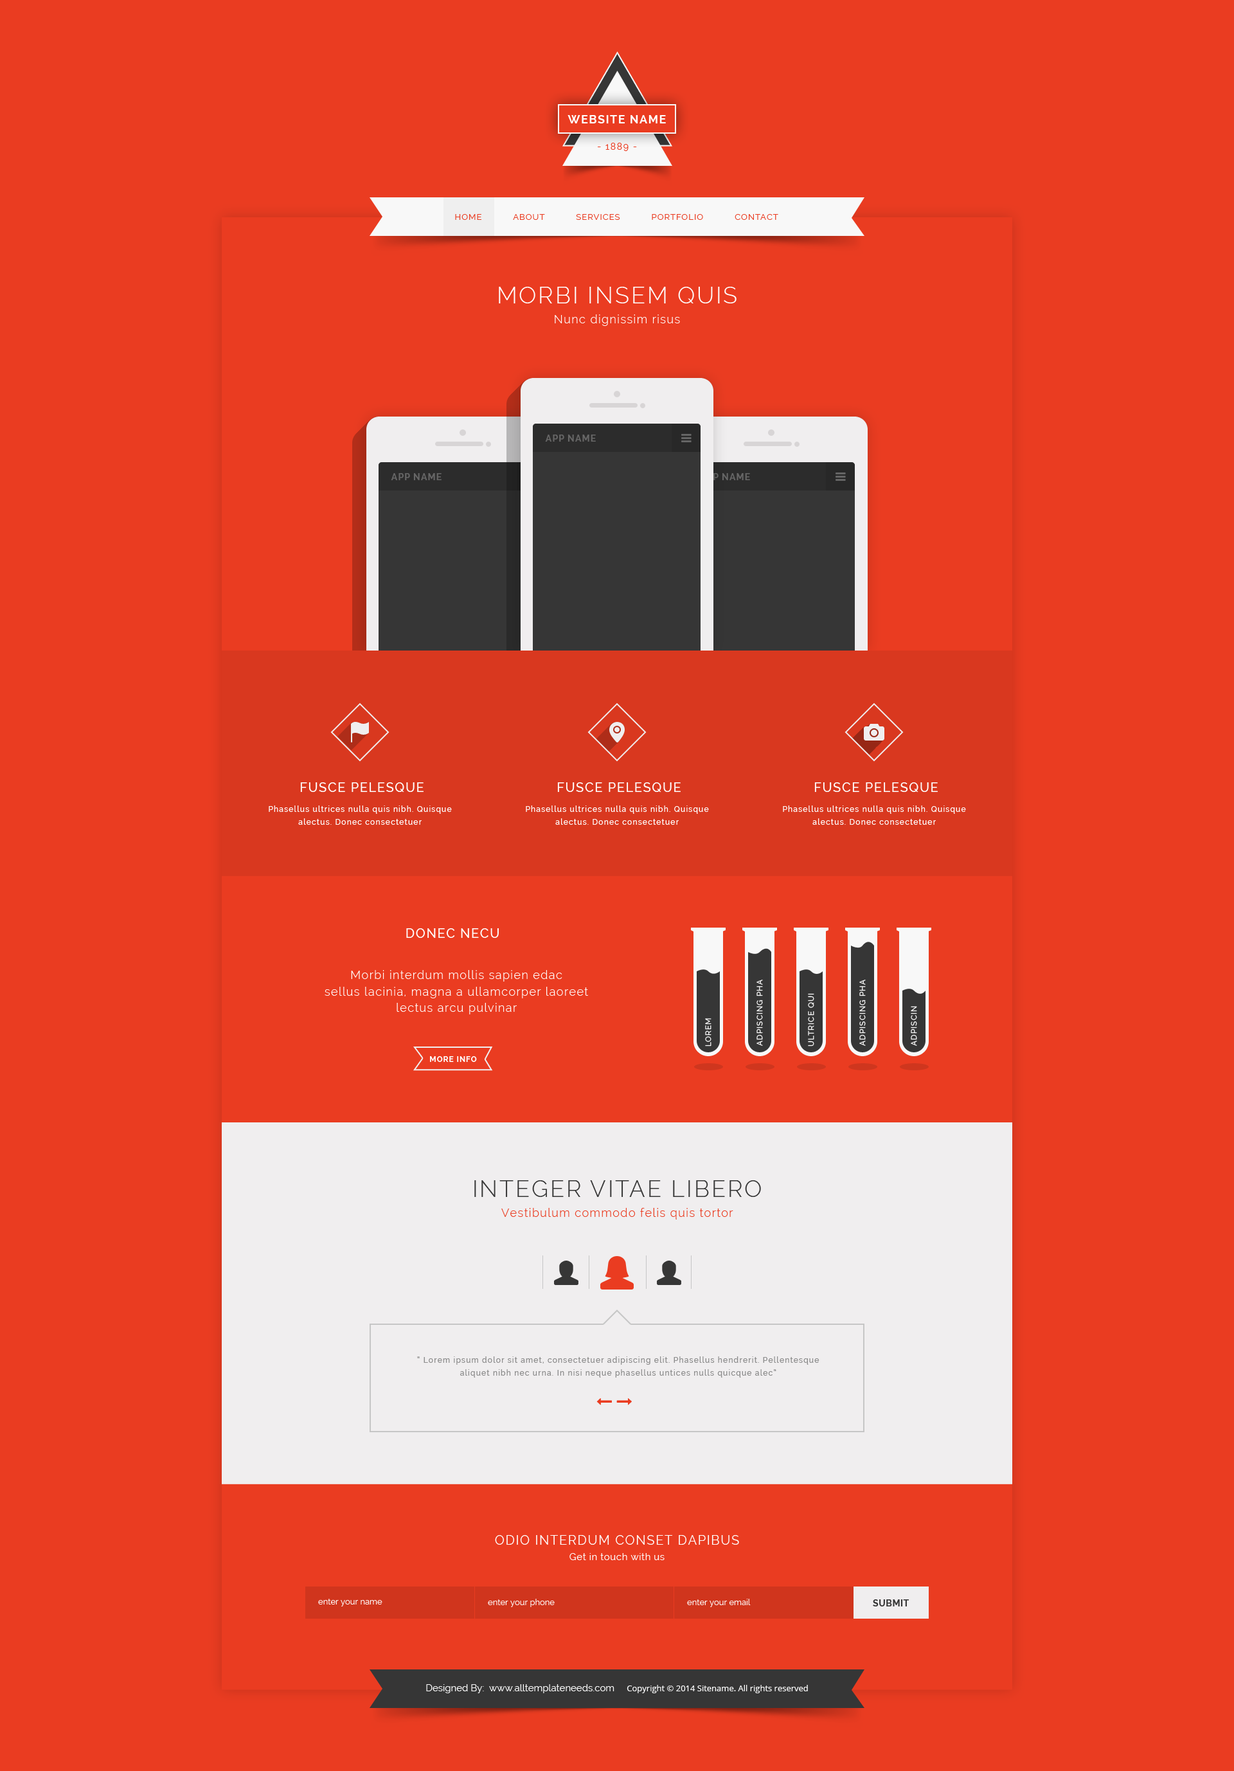
<style>
.page{position:relative;width:1234px;height:1771px;background:#ea3c21}
.page>*{position:absolute;margin:0}
.t1{font:11.6px "Raleway-Bold";letter-spacing:0.08em;color:#ffffff;text-transform:uppercase}
.t2{font:9px "Raleway";letter-spacing:0.12em;color:#ea3c21;text-transform:uppercase}
.t3{font:8.4px "Raleway";letter-spacing:0.08em;color:#ea3c21;text-transform:uppercase}
.t4{font:23.1px "Raleway-Light";letter-spacing:0.08em;color:#ffffff;text-transform:uppercase}
.t5{font:11.6px "Raleway-Light";letter-spacing:0.08em;color:#ffffff}
.t6{font:9px "Raleway-Bold";letter-spacing:0.08em;color:#676767;text-transform:uppercase}
.t7{font:12.9px "Raleway-Medium";letter-spacing:0.08em;color:#ffffff;text-transform:uppercase}
.t8{font:7.7px/12.9px "Raleway-Medium";letter-spacing:0.1em;color:#ffffff}
.t9{font:11.6px/16.5px "Raleway-Light";letter-spacing:0.08em;color:#ffffff}
.t10{font:7.7px "Raleway-Medium";letter-spacing:0.08em;color:#ffffff;text-transform:uppercase}
.t11{font:7.7px "Raleway-Bold";letter-spacing:0.08em;color:#ffffff;text-transform:uppercase}
.t12{font:23.1px "Raleway-Light";letter-spacing:0.08em;color:#363636;text-transform:uppercase}
.t13{font:11.6px "Raleway-Light";letter-spacing:0.08em;color:#ea3c21}
.t14{font:7.7px/12.9px "Raleway-Medium";letter-spacing:0.1em;color:#8d8d8d}
.t15{font:12.9px "Raleway";letter-spacing:0.08em;color:#ffffff;text-transform:uppercase}
.t16{font:9.6px "Raleway";letter-spacing:0.04em;color:#ffffff}
.t17{font:8.4px "Raleway";color:#ffffff}
.t18{font:9px "Raleway-Bold";letter-spacing:0.04em;color:#363636;text-transform:uppercase}
.t19{font:8.4px "OpenSans";color:#ffffff}
.t20{font:9.6px "Raleway";color:#ffffff}
</style>
<div class="page">
<p class="t1" style="left:568px;top:115px;width:98px;height:8px">website name</p>
<p class="t2" style="left:598px;top:143px;width:39px;height:8px">- 1889 -</p>
<p class="t3" style="left:455px;top:214px;width:324px;height:6px">Home           About           Services           Portfolio           Contact</p>
<p class="t4" style="left:499px;top:287px;width:238px;height:16px">Morbi insem quis</p>
<p class="t5" style="left:555px;top:314px;width:125px;height:12px">Nunc dignissim risus</p>
<p class="t6" style="left:545px;top:435px;width:51px;height:7px">App Name</p>
<p class="t6" style="left:391px;top:473px;width:51px;height:7px">App Name</p>
<p class="t7" style="left:300px;top:782px;width:124px;height:10px">Fusce pelesque</p>
<p class="t7" style="left:557px;top:782px;width:124px;height:10px">Fusce pelesque</p>
<p class="t7" style="left:815px;top:782px;width:123px;height:10px">Fusce pelesque</p>
<p class="t8" style="left:269px;top:806px;width:183px;height:19px;text-align:center">Phasellus ultrices nulla quis nibh. Quisque alectus. Donec consectetuer</p>
<p class="t8" style="left:526px;top:806px;width:183px;height:19px;text-align:center">Phasellus ultrices nulla quis nibh. Quisque alectus. Donec consectetuer</p>
<p class="t8" style="left:783px;top:806px;width:183px;height:19px;text-align:center">Phasellus ultrices nulla quis nibh. Quisque alectus. Donec consectetuer</p>
<p class="t7" style="left:406px;top:928px;width:93px;height:10px">Donec necu</p>
<p class="t9" style="left:325px;top:970px;width:263px;height:44px;text-align:center">Morbi interdum mollis sapien edac<br>sellus lacinia, magna a ullamcorper laoreet<br>lectus arcu pulvinar</p>
<p class="t10" style="left:757px;top:980px;width:6px;height:66px;rotate:-90deg">Adpiscing pha</p>
<p class="t10" style="left:860px;top:980px;width:6px;height:66px;rotate:-90deg">Adpiscing pha</p>
<p class="t10" style="left:808px;top:993px;width:7px;height:54px;rotate:-90deg">Ultrice qui</p>
<p class="t10" style="left:911px;top:1006px;width:6px;height:40px;rotate:-90deg">Adpiscin</p>
<p class="t10" style="left:705px;top:1018px;width:7px;height:29px;rotate:-90deg">Lorem</p>
<p class="t11" style="left:430px;top:1056px;width:47px;height:6px">More info</p>
<p class="t12" style="left:474px;top:1180px;width:287px;height:17px">Integer vitae libero</p>
<p class="t13" style="left:501px;top:1208px;width:233px;height:12px">Vestibulum commodo felis quis tortor</p>
<p class="t14" style="left:417px;top:1356px;width:403px;height:22px;text-align:center">“ Lorem ipsum dolor sit amet, consectetuer adipiscing elit. Phasellus hendrerit. Pellentesque aliquet nibh nec urna. In nisi neque phasellus untices nulls quicque alec”</p>
<p class="t15" style="left:495px;top:1535px;width:244px;height:10px">Odio Interdum Conset Dapibus</p>
<p class="t16" style="left:570px;top:1553px;width:95px;height:7px">Get in touch with us</p>
<p class="t17" style="left:318px;top:1599px;width:64px;height:8px">enter your name</p>
<p class="t17" style="left:488px;top:1599px;width:67px;height:8px">enter your phone</p>
<p class="t17" style="left:687px;top:1599px;width:64px;height:8px">enter your email</p>
<p class="t18" style="left:873px;top:1599px;width:37px;height:8px">Submit</p>
<p class="t19" style="left:426px;top:1684px;width:382px;height:9px"><span class="t20">Designed By:  www.alltemplateneeds.com     </span>Copyright © 2014 Sitename. All rights reserved</p>
</div>
